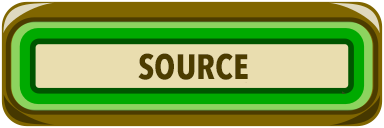
<style>
.page{position:relative;width:384px;height:128px;background:#e9ddaf}
.page>*{position:absolute;margin:0}
.t1{font:35px "AvenirNextCondensed-Bold";color:#4c3c00}
</style>
<div class="page">
<p class="t1" style="left:138px;top:53px;width:110px;height:27px">SOURCE</p>
</div>
